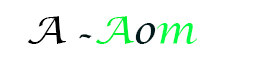
<style>
.page{position:relative;width:269px;height:60px;background:#ffffff}
.page>*{position:absolute;margin:0}
.t1{font:39px "LucidaCalligraphy-Italic";color:#000100}
.t2{font:39px "VinerHandITC";color:#001112}
.t3{font:39px "LucidaCalligraphy-Italic";color:#00f333}
.t4{font:39px "LucidaCalligraphy-Italic";color:#00191a}
.t5{font:39px "LucidaCalligraphy-Italic";color:#00fe42}
</style>
<div class="page">
<p class="t1" style="left:27px;top:16px;width:170px;height:28px">A <span class="t2">-</span><span class="t3">A</span><span class="t4">o</span><span class="t5">m</span></p>
</div>
